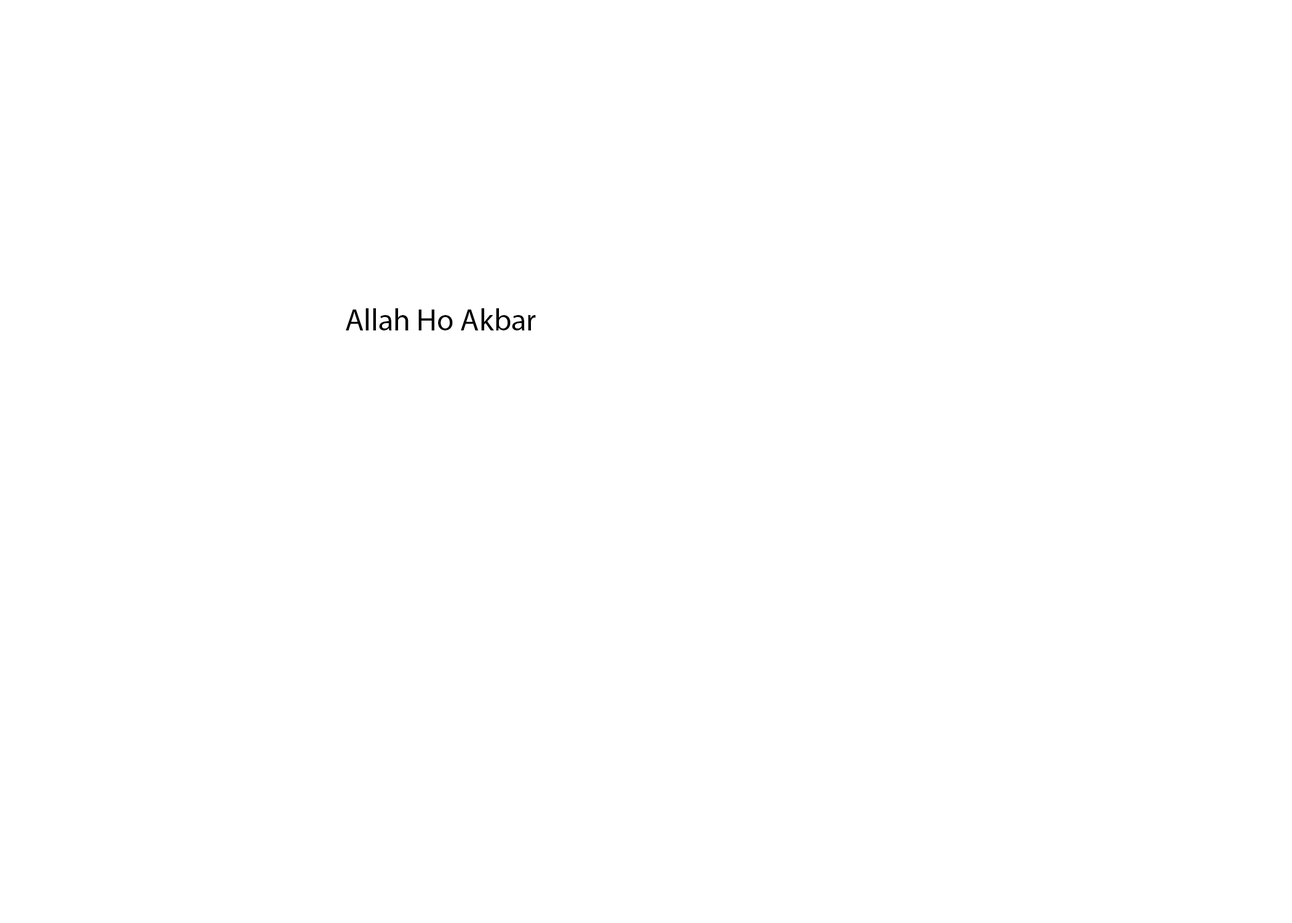
<style>
.page{position:relative;width:1292px;height:923px;background:#ffffff}
.page>*{position:absolute;margin:0}
.t1{font:30.8px "MyriadPro-Regular";color:#000000}
</style>
<div class="page">
<p class="t1" style="left:346px;top:308px;width:190px;height:22px">Allah Ho Akbar</p>
</div>
